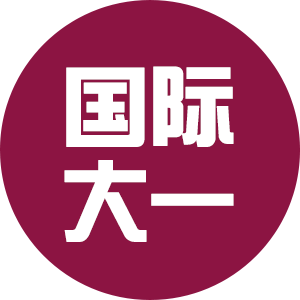
<style>
.page{position:relative;width:300px;height:300px;background:#8c1442}
.page>*{position:absolute;margin:0}
.t1{font:85px/95px "SingYiEG-Ultra-GB";color:#ffffff;font-weight:bold}
</style>
<div class="page">
<p class="t1" style="left:64px;top:66px;width:170px;height:176px;text-align:center">国际<br>大一</p>
</div>
